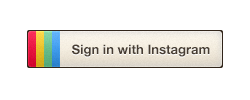
<style>
.page{position:relative;width:250px;height:100px;background:#ffffff}
.page>*{position:absolute;margin:0}
.t1{font:13px "HelveticaNeue-Bold";color:#483e33}
</style>
<div class="page">
<p class="t1" style="left:72px;top:44px;width:138px;height:13px">Sign in with Instagram</p>
</div>
